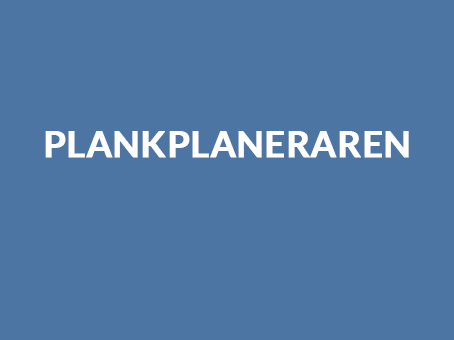
<style>
.page{position:relative;width:454px;height:340px;background:#4c75a3}
.page>*{position:absolute;margin:0}
.t1{font:36px "Lato-Bold";color:#ffffff;text-transform:uppercase;font-weight:bold}
</style>
<div class="page">
<p class="t1" style="left:45px;top:131px;width:364px;height:27px">plankplaneraren</p>
</div>
